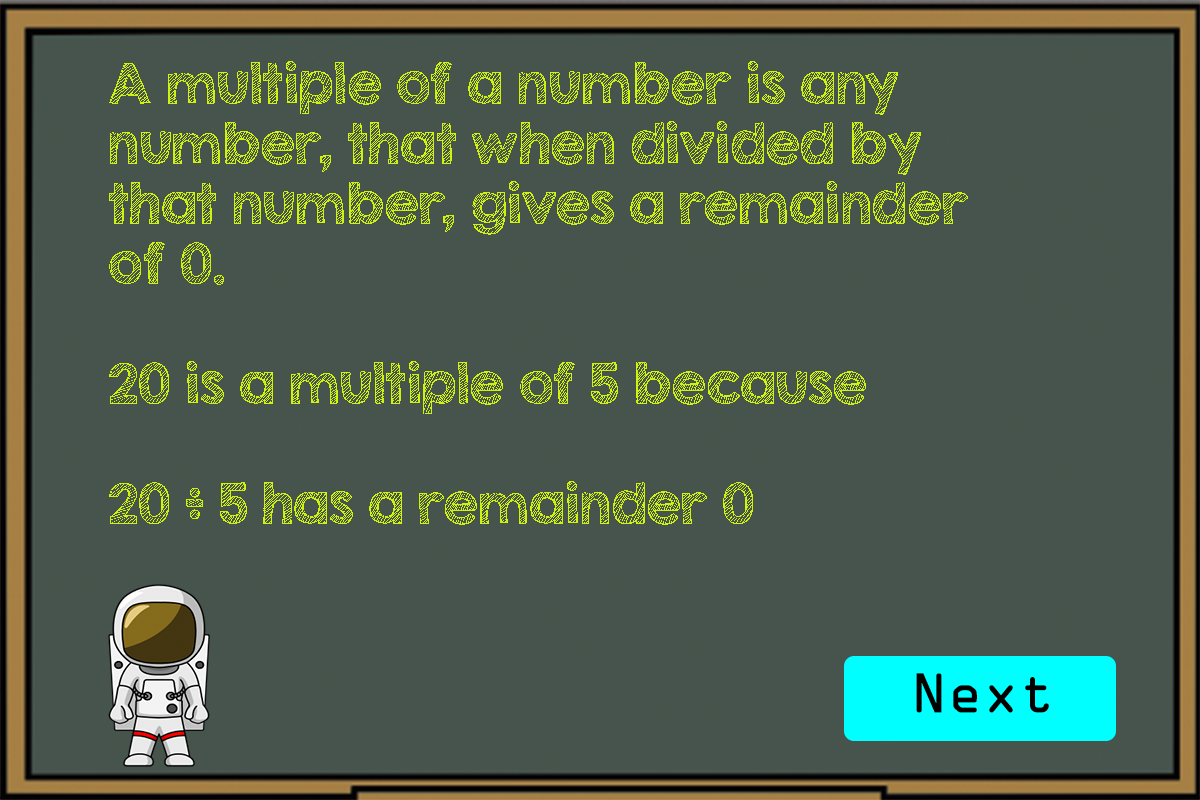
<style>
.page{position:relative;width:1200px;height:800px;background:#46544c}
.page>*{position:absolute;margin:0}
.t1{font:50px "KGSecondChancesSketch";color:#d0f30e}
.t2{font:37.5px "MyriadPro-Regular";color:#000000}
.t3{font:50px "OCRAStd";color:#000000}
.t4{font:100px "MyriadPro-Regular";color:#000000}
</style>
<div class="page">
<p class="t1" style="left:109px;top:61px;width:859px;height:464px">A multiple of a number is any number, that when divided by that number, gives a remainder of 0.<br><br>20 is a multiple of 5 because<br><br>20 ÷ 5 has a remainder 0</p>
<p class="t2" style="left:916px;top:673px;width:133px;height:40px;text-align:center"><span class="t3">Next<br></span>NexNedNe<span class="t4">Ne</span></p>
</div>
